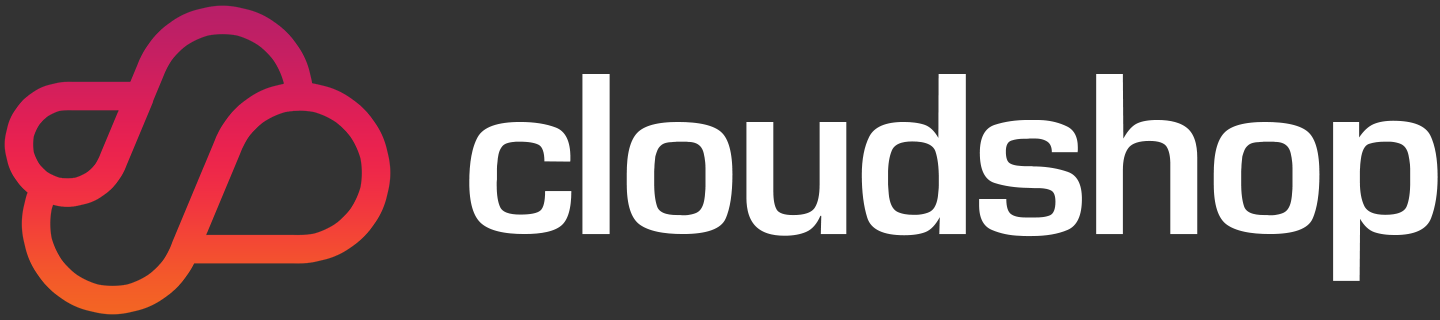
<style>
.page{position:relative;width:1440px;height:320px;background:#333333}
.page>*{position:absolute;margin:0}
.t1{font:240px "Eurotype";letter-spacing:-0.03em;color:#ffffff}
</style>
<div class="page">
<p class="t1" style="left:469px;top:74px;width:969px;height:207px">cloudshop</p>
</div>
